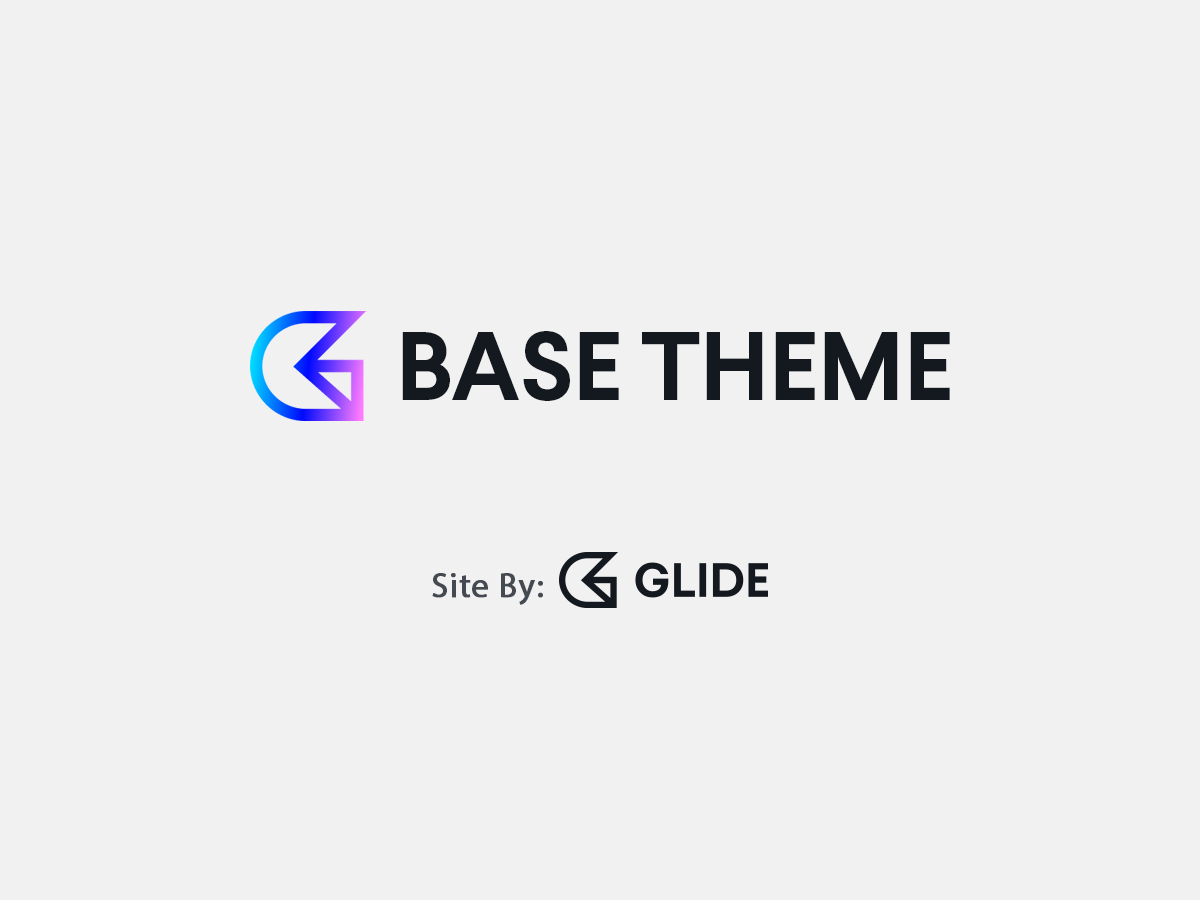
<style>
.page{position:relative;width:1200px;height:900px;background:#f1f1f2}
.page>*{position:absolute;margin:0}
.t1{font:96.6px "Larsseit-Bold";letter-spacing:-0.005em;color:#14191f}
.t2{font:58.9px "MyriadPro-Regular";letter-spacing:0.01em;color:#454a50;font-weight:bold}
</style>
<div class="page">
<p class="t1" style="left:402px;top:331px;width:548px;height:70px">BASE THEME</p>
<p class="t2" style="left:432px;top:573px;width:111px;height:32px">Site By:</p>
</div>
